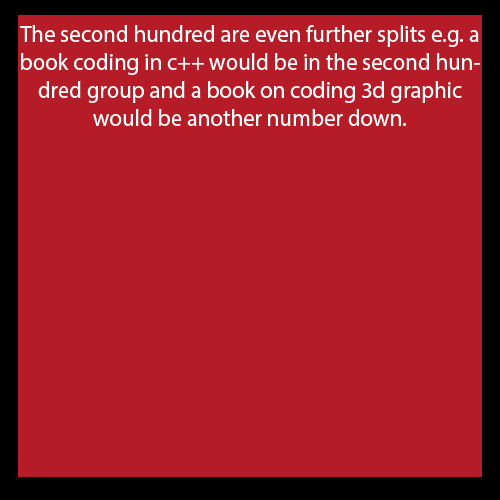
<style>
.page{position:relative;width:500px;height:500px;background:#b61c27}
.page>*{position:absolute;margin:0}
.t1{font:23.3px "MyriadPro-Regular";color:#ffffff}
</style>
<div class="page">
<p class="t1" style="left:20px;top:25px;width:460px;height:101px;text-align:center">The second hundred are even further splits e.g. a book coding in c++ would be in the second hundred group and a book on coding 3d graphic would be another number down.</p>
</div>
